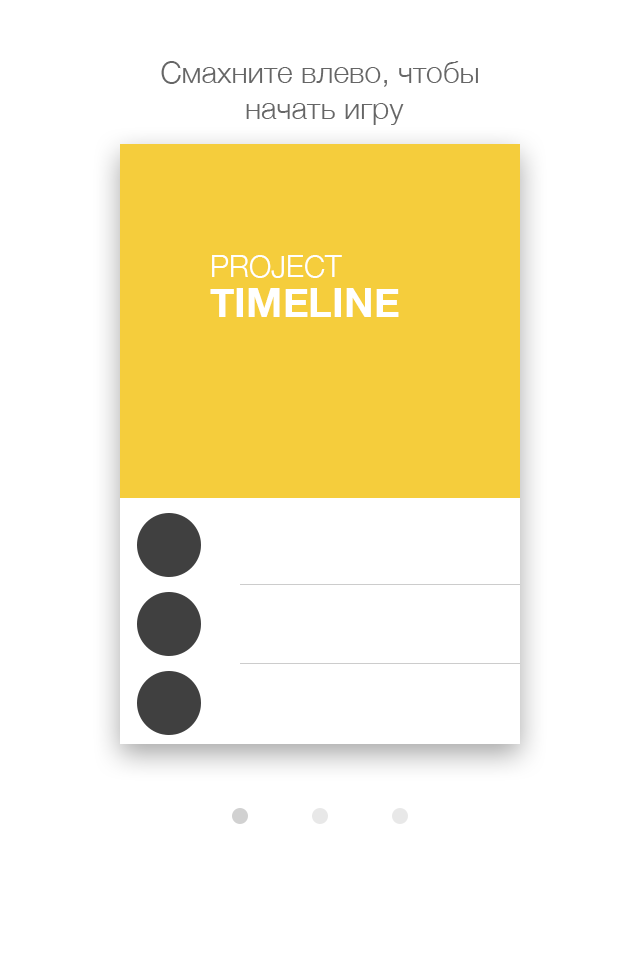
<style>
.page{position:relative;width:640px;height:960px;background:#ffffff}
.page>*{position:absolute;margin:0}
.t1{font:30px "HelveticaNeue-Light";color:#666666}
.t2{font:30px "HelveticaNeue-Light";color:#ffffff}
.t3{font:40px "HelveticaNeue-Bold";color:#ffffff}
</style>
<div class="page">
<p class="t1" style="left:161px;top:61px;width:317px;height:64px;text-align:center">Cмахните влево, чтобы<br> начать игру</p>
<p class="t2" style="left:212px;top:255px;width:130px;height:23px">PROJECT</p>
<p class="t3" style="left:210px;top:288px;width:189px;height:29px">TIMELINE</p>
</div>
